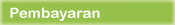
<style>
.page{position:relative;width:175px;height:25px;background:#96c04a}
.page>*{position:absolute;margin:0}
.t1{font:14.2px "ArialRoundedMTBold";color:#fdfcfc;scale:1.07 1}
</style>
<div class="page">
<p class="t1" style="left:10px;top:7px;width:90px;height:14px">Pembayaran</p>
</div>
